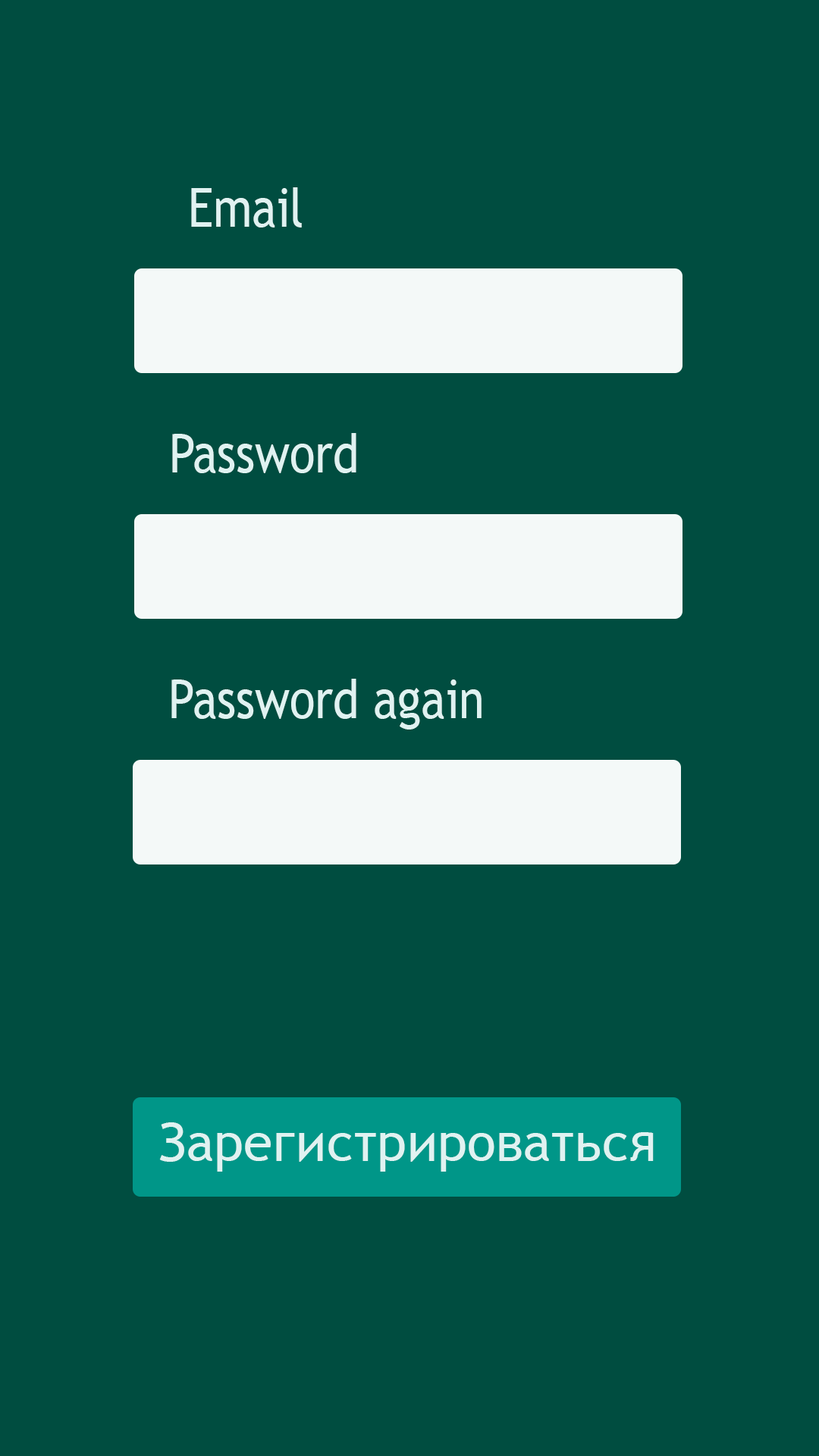
<style>
.page{position:relative;width:819px;height:1456px;background:#004d40}
.page>*{position:absolute;margin:0}
.t1{font:54.2px "TrebuchetMS";color:#e0f2f1;scale:0.86 1}
.t2{font:53.4px "TrebuchetMS";color:#e0f2f1}
</style>
<div class="page">
<p class="t1" style="left:191px;top:187px;width:111px;height:40px">Email</p>
<p class="t1" style="left:172px;top:433px;width:184px;height:40px">Password</p>
<p class="t1" style="left:171px;top:679px;width:311px;height:51px">Password again</p>
<p class="t2" style="left:159px;top:1122px;width:495px;height:50px">Зарегистрироваться</p>
</div>
